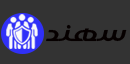
<style>
.page{position:relative;width:130px;height:64px;background:#333333}
.page>*{position:absolute;margin:0}
.t1{font:28px "Mj_Dalal";color:#060000}
</style>
<div class="page">
<p class="t1" style="left:46px;top:24px;width:81px;height:18px">سهند</p>
</div>
